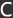
<style>
.page{position:relative;width:13px;height:18px;background:#333333}
.page>*{position:absolute;margin:0}
.t1{font:20px "MicrosoftNewTaiLue";color:#ffffff}
</style>
<div class="page">
<p class="t1" style="left:0px;top:2px;width:12px;height:15px">C</p>
</div>
